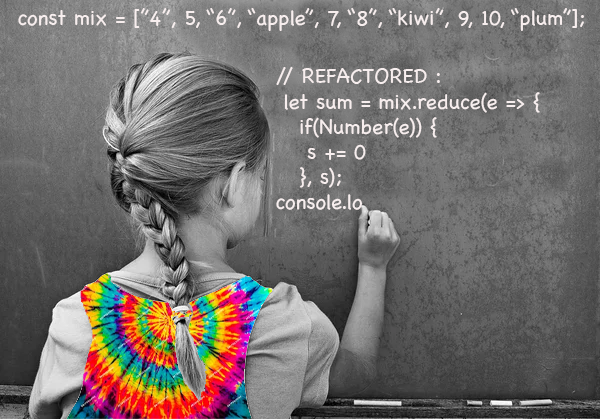
<style>
.page{position:relative;width:600px;height:419px}
.page>*{position:absolute;margin:0}
.t1{font:21px "Chalkboard";color:#f7eeee}
</style>
<div class="page">
<p class="t1" style="left:18px;top:8px;width:566px;height:23px">const mix = [”4”, 5, “6”, “apple”, 7, “8”, “kiwi”, 9, 10, “plum”];</p>
<p class="t1" style="left:276px;top:67px;width:264px;height:143px">// REFACTORED :<br> let sum = mix.reduce(e =&gt; {<br>   if(Number(e)) {<br>    s += 0<br>   }, s);<br>console.lo</p>
</div>
